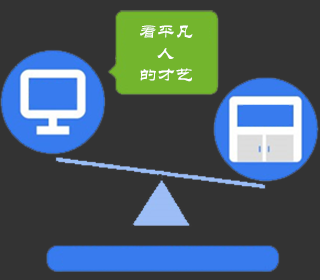
<style>
.page{position:relative;width:320px;height:280px;background:#333333}
.page>*{position:absolute;margin:0}
.t1{font:18px "STLiti";color:#ffffff}
</style>
<div class="page">
<p class="t1" style="left:140px;top:25px;width:53px;height:57px">看平凡<br>    人<br>的才艺</p>
</div>
